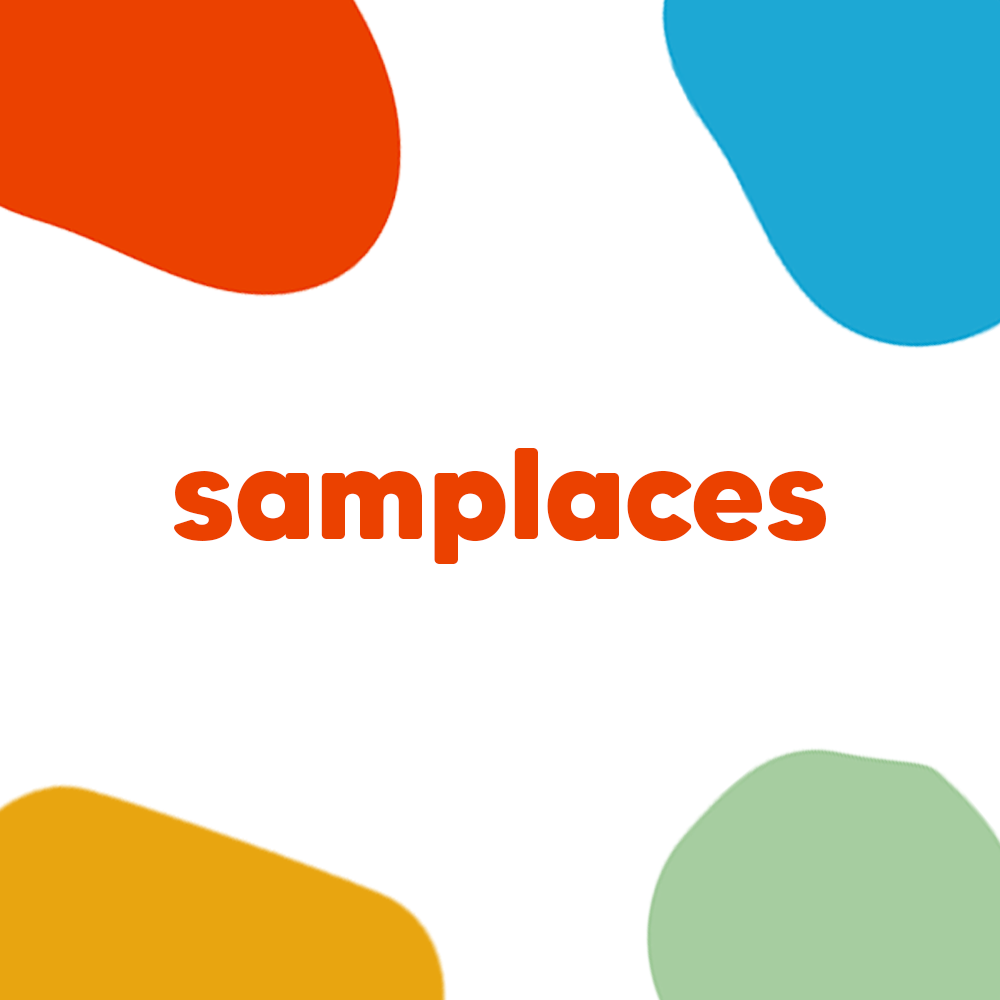
<style>
.page{position:relative;width:1000px;height:1000px;background:#ffffff}
.page>*{position:absolute;margin:0}
.t1{font:129.4px "MADETommySoft-ExtraBold";color:#eb4100}
</style>
<div class="page">
<p class="t1" style="left:174px;top:448px;width:652px;height:116px">samplaces</p>
</div>
